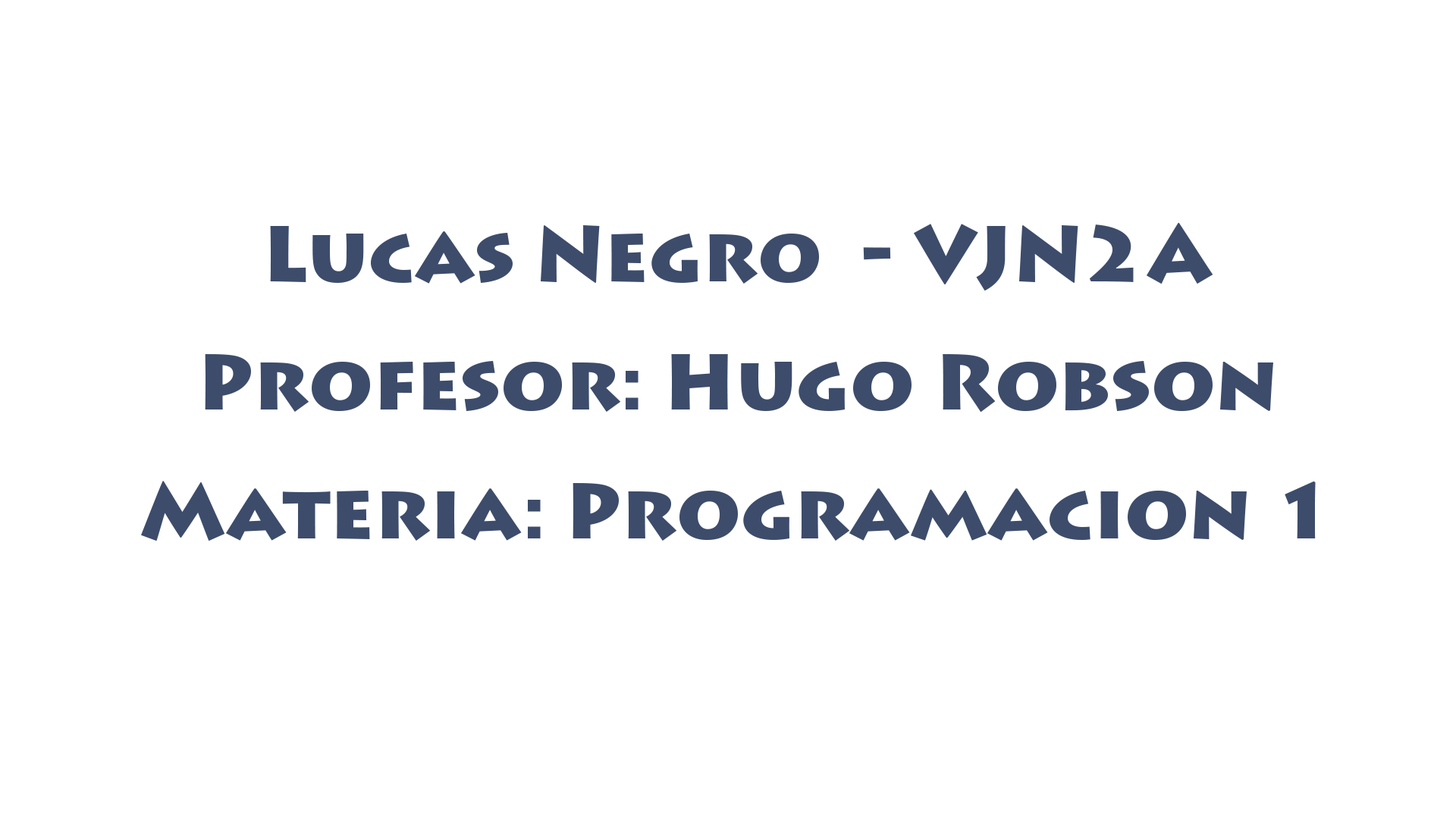
<style>
.page{position:relative;width:1456px;height:819px;background:#ffffff}
.page>*{position:absolute;margin:0}
.t1{font:78.3px/128.3px "LithosPro-Black";color:#3d4c6b}
</style>
<div class="page">
<p class="t1" style="left:141px;top:222px;width:1175px;height:319px;text-align:center">Lucas Negro  - VJN2A<br>Profesor: Hugo Robson<br>Materia: Programacion 1</p>
</div>
